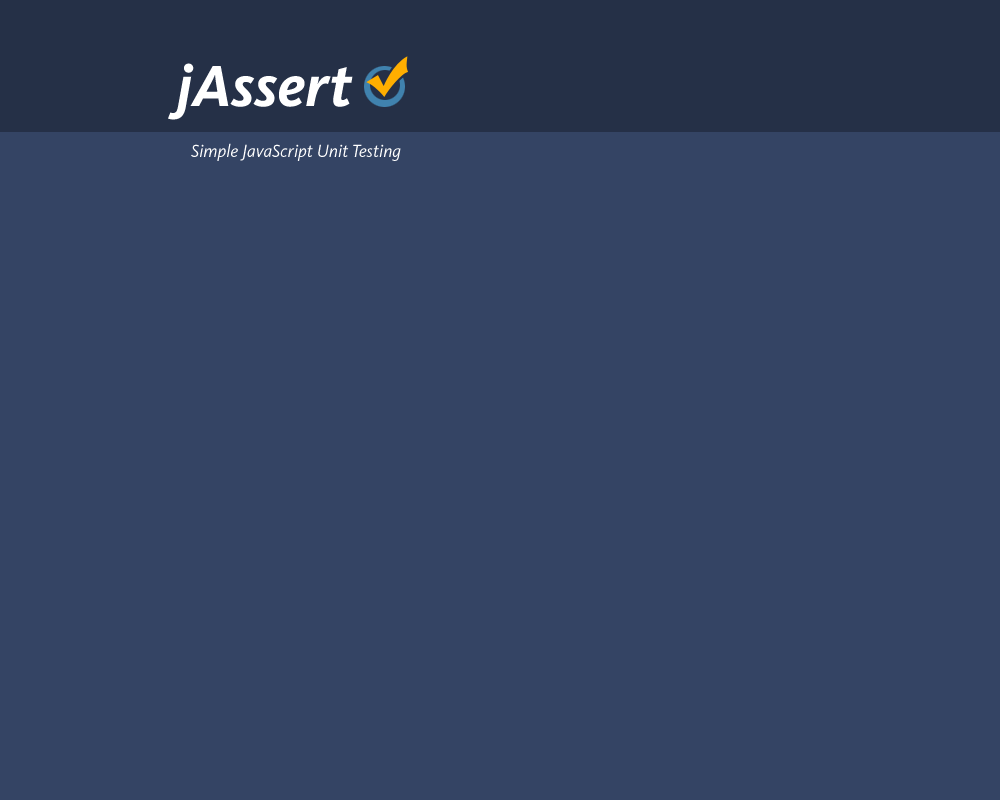
<style>
.page{position:relative;width:1000px;height:800px;background:#344464}
.page>*{position:absolute;margin:0}
.t1{font:60px "KievitPro-BoldItalic";color:#ffffff}
.t2{font:18px "KievitPro-Italic";color:#ffffff}
</style>
<div class="page">
<p class="t1" style="left:168px;top:63px;width:185px;height:57px">jAssert</p>
<p class="t2" style="left:191px;top:143px;width:210px;height:18px">Simple JavaScript Unit Testing</p>
</div>
